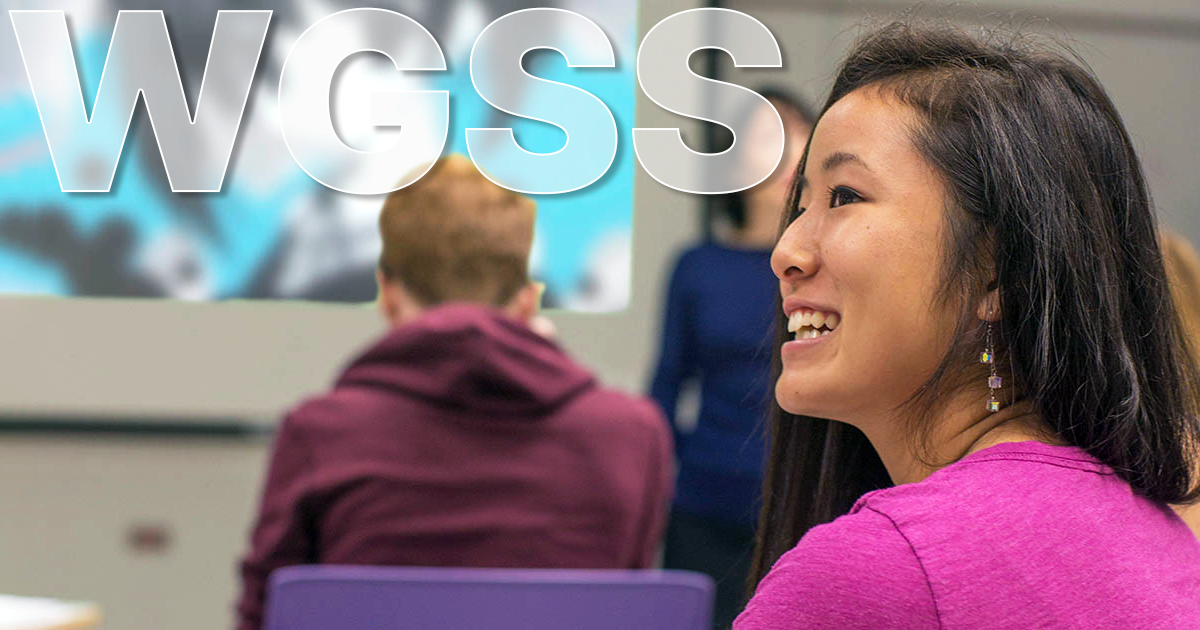
<style>
.page{position:relative;width:1200px;height:630px}
.page>*{position:absolute;margin:0}
.t1{font:250px "Inter-Black"}
</style>
<div class="page">
<p class="t1" style="left:8px;top:7px;width:777px;height:188px">WGSS</p>
</div>
